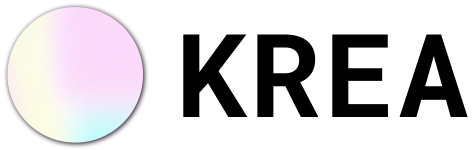
<style>
.page{position:relative;width:472px;height:150px;background:#ffffff}
.page>*{position:absolute;margin:0}
.t1{font:115.7px "RobotoMono-Bold";letter-spacing:0.04em;color:#000000}
</style>
<div class="page">
<p class="t1" style="left:183px;top:34px;width:285px;height:83px">KREA</p>
</div>
